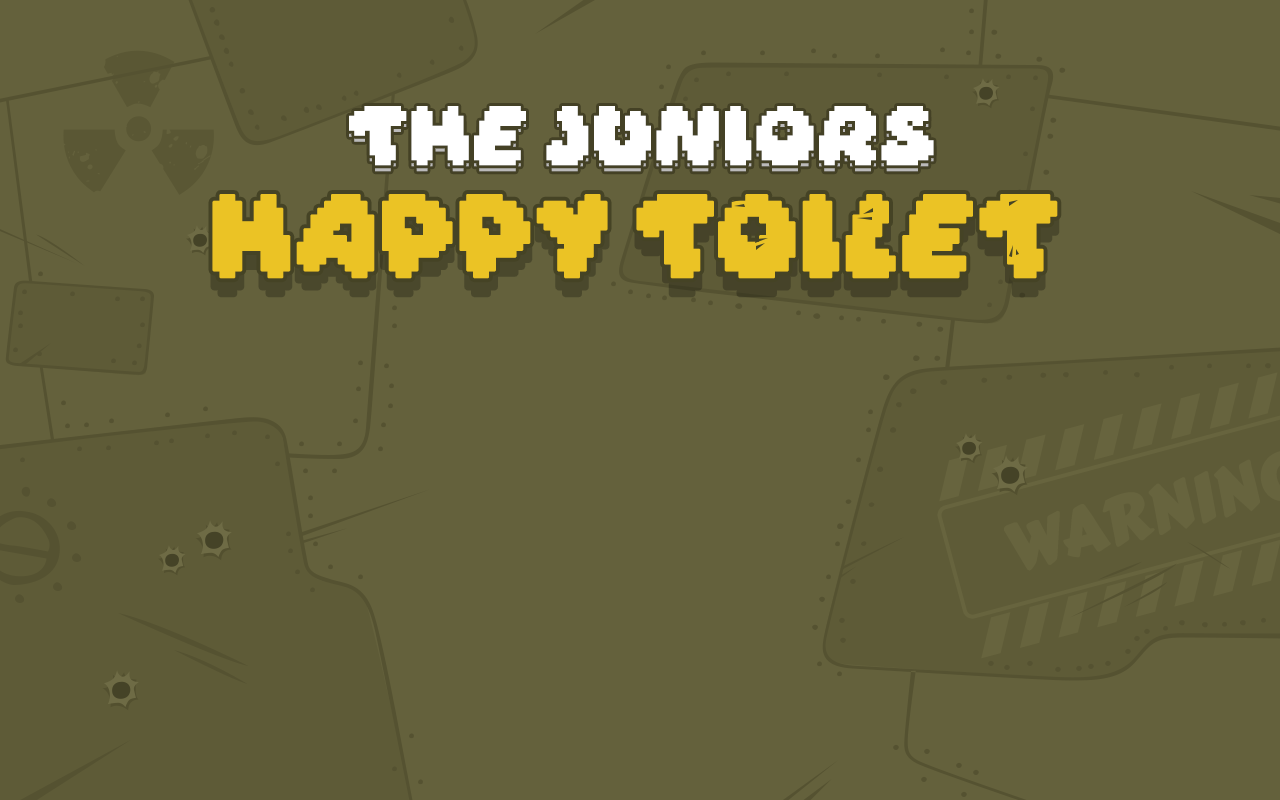
<style>
.page{position:relative;width:1280px;height:800px;background:#64613c}
.page>*{position:absolute;margin:0}
.t1{font:52.3px "Daydream";letter-spacing:-0.025em;color:#ffffff;text-transform:uppercase;font-weight:bold;scale:1.05 1}
.t2{font:73px "Daydream";color:#ebc325;text-transform:uppercase;font-weight:bold}
</style>
<div class="page">
<p class="t1" style="left:349px;top:112px;width:585px;height:60px">THE juniors</p>
<p class="t1" style="left:349px;top:106px;width:585px;height:60px">the juniors</p>
<p class="t2" style="left:212px;top:194px;width:846px;height:85px">happy toilet</p>
</div>
